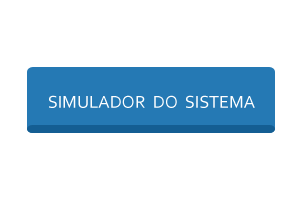
<style>
.page{position:relative;width:300px;height:200px;background:#ffffff}
.page>*{position:absolute;margin:0}
.t1{font:18px "Corbel";color:#ffffff;text-transform:uppercase}
</style>
<div class="page">
<p class="t1" style="left:49px;top:95px;width:206px;height:13px">Simulador  do  sistema</p>
</div>
